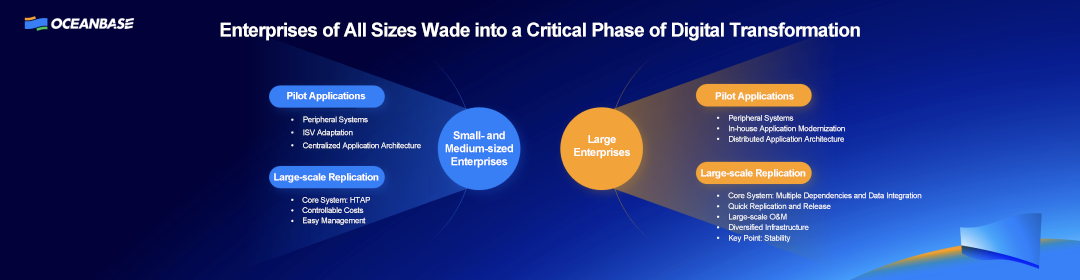
<style>
.page{position:relative;width:1080px;height:280px;background:#020139}
.page>*{position:absolute;margin:0}
.t1{font:19px "Arial-BoldMT";letter-spacing:-0.03em;color:#ffffff}
.t2{font:10px "Arial-BoldMT";letter-spacing:-0.03em;color:#ffffff}
.t3{font:8px/13px "ArialMT";letter-spacing:-0.03em;color:#ffffff}
.t4{font:8px/10.5px "ArialMT";letter-spacing:-0.03em;color:#ffffff}
.t5{font:11px/13px "Arial-BoldMT";letter-spacing:-0.03em;color:#ffffff}
.t6{font:8px/10.2px "ArialMT";letter-spacing:-0.03em;color:#ffffff}
.t7{font:8px/10.6px "ArialMT";letter-spacing:-0.03em;color:#ffffff}
</style>
<div class="page">
<p class="t1" style="left:220px;top:22px;width:640px;height:19px">Enterprises of All Sizes Wade into a Critical Phase of Digital Transformation</p>
<p class="t2" style="left:287px;top:92px;width:79px;height:10px">Pilot Applications</p>
<p class="t2" style="left:715px;top:92px;width:79px;height:10px">Pilot Applications</p>
<p class="t3" style="left:303px;top:116px;width:118px;height:34px">Peripheral Systems <br>ISV Adaptation<br>Centralized Application Architecture</p>
<p class="t4" style="left:729px;top:115px;width:116px;height:29px">Peripheral Systems<br>In-house Application Modernization<br>Distributed Application Architecture</p>
<p class="t5" style="left:445px;top:131px;width:68px;height:37px;text-align:center">Small- and Medium-sized Enterprises</p>
<p class="t5" style="left:574px;top:135px;width:56px;height:24px;text-align:center">Large Enterprises</p>
<p class="t2" style="left:274px;top:173px;width:105px;height:10px">Large-scale Replication</p>
<p class="t2" style="left:701px;top:169px;width:105px;height:10px">Large-scale Replication</p>
<p class="t6" style="left:302px;top:197px;width:68px;height:28px">Core System: HTAP<br>Controllable Costs<br>Easy Management</p>
<p class="t7" style="left:728px;top:192px;width:194px;height:51px">Core System: Multiple Dependencies and Data Integration<br>Quick Replication and Release<br>Large-scale O&amp;M<br>Diversified Infrastructure<br>Key Point: Stability</p>
</div>
